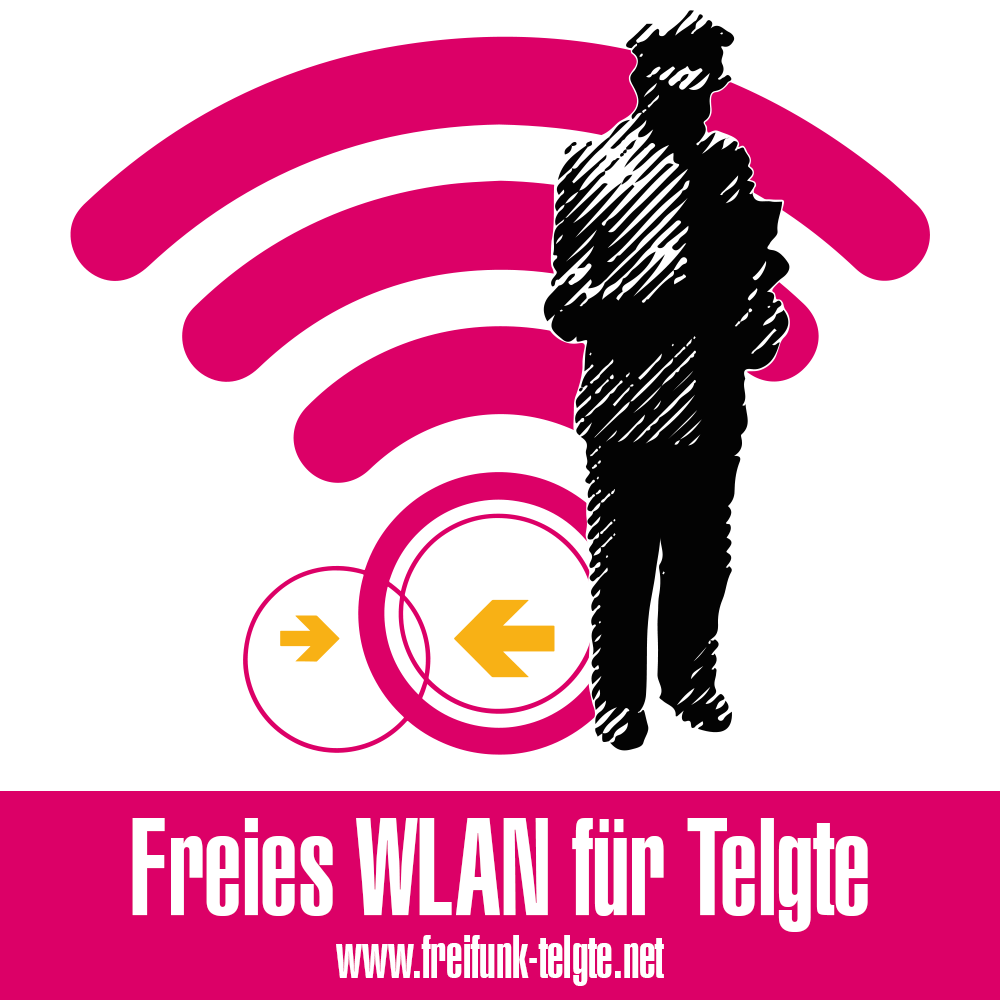
<style>
.page{position:relative;width:1000px;height:1000px;background:#ffffff}
.page>*{position:absolute;margin:0}
.t1{font:134px "Swiss911BT-UltraCompressed";color:#ffffff}
.t2{font:59px "Swiss911BT-UltraCompressed";color:#ffffff}
</style>
<div class="page">
<p class="t1" style="left:132px;top:818px;width:736px;height:114px">Freies WLAN für Telgte</p>
<p class="t2" style="left:336px;top:935px;width:328px;height:51px">www.freifunk-telgte.net</p>
</div>
